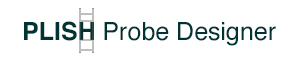
<style>
.page{position:relative;width:300px;height:60px;background:#ffffff}
.page>*{position:absolute;margin:0}
.t1{font:25px "Helvetica";color:#003333}
.t2{font:25px "Helvetica-Bold";color:#003333}
</style>
<div class="page">
<p class="t1" style="left:24px;top:21px;width:252px;height:25px"><span class="t2">PLISH </span>Probe Designer</p>
</div>
